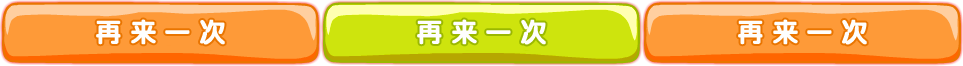
<style>
.page{position:relative;width:963px;height:66px;background:#fe9a38}
.page>*{position:absolute;margin:0}
.t1{font:26px "JCuYuan";letter-spacing:0.3em;color:#fefefe;font-weight:bold}
</style>
<div class="page">
<p class="t1" style="left:96px;top:19px;width:129px;height:26px">再来一次</p>
<p class="t1" style="left:417px;top:19px;width:129px;height:26px">再来一次</p>
<p class="t1" style="left:738px;top:19px;width:129px;height:26px">再来一次</p>
</div>
